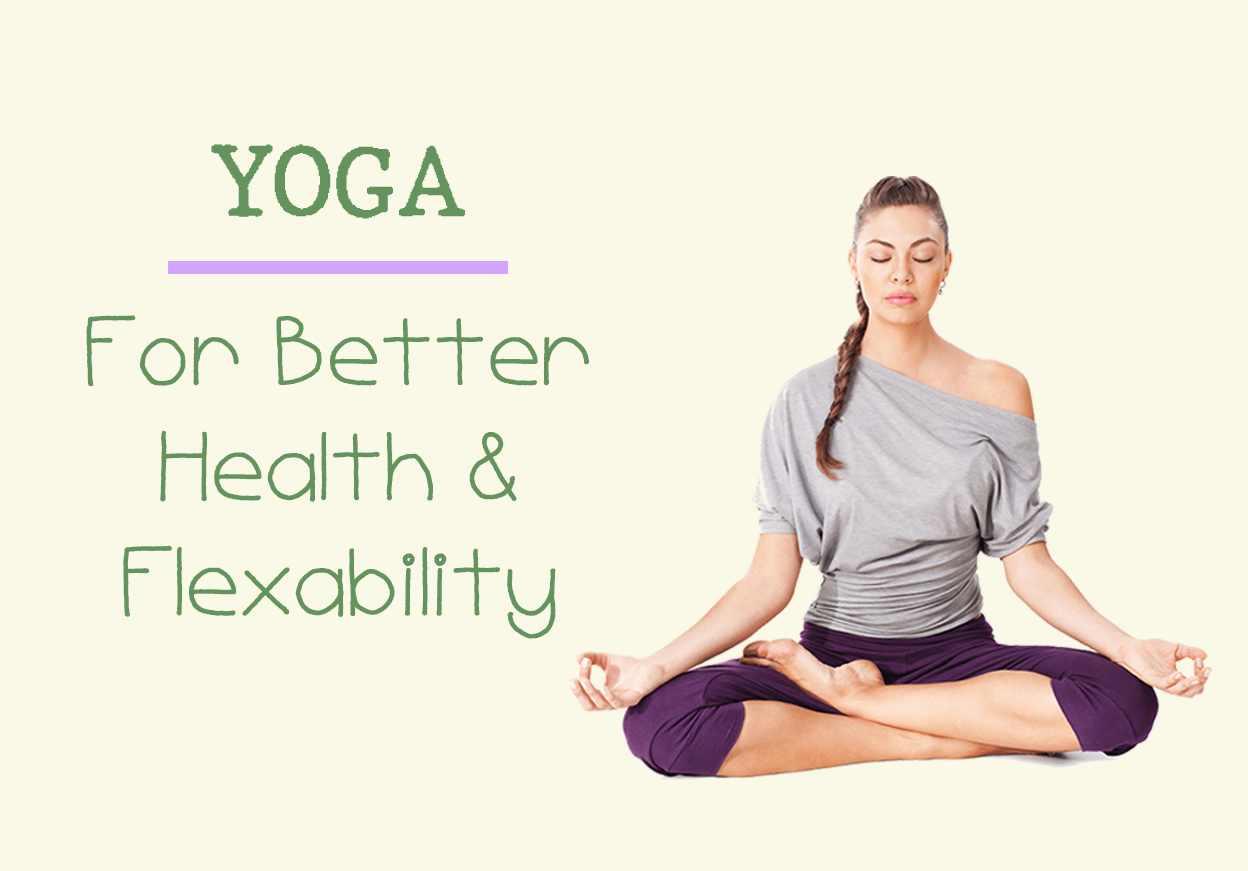
<style>
.page{position:relative;width:1248px;height:871px;background:#faf9e8}
.page>*{position:absolute;margin:0}
.t1{font:96px "MostlyMono";color:#65935e;font-weight:bold}
</style>
<div class="page">
<p class="t1" style="left:86px;top:315px;width:504px;height:324px;text-align:center">For Better<br>Health &amp;<br>Flexability</p>
</div>
